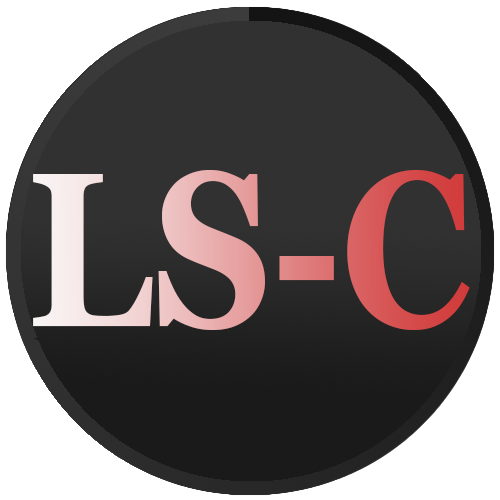
<style>
.page{position:relative;width:500px;height:500px;background:#313131}
.page>*{position:absolute;margin:0}
.t1{font:220px "Georgia-Bold";scale:0.83 1}
</style>
<div class="page">
<p class="t1" style="left:33px;top:170px;width:437px;height:160px">LS-C</p>
</div>
